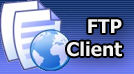
<style>
.page{position:relative;width:134px;height:74px}
.page>*{position:absolute;margin:0}
.t1{font:19px "Tahoma-Bold";color:#f2f2f2}
</style>
<div class="page">
<p class="t1" style="left:67px;top:19px;width:55px;height:38px;text-align:right">FTP<br>Client</p>
</div>
